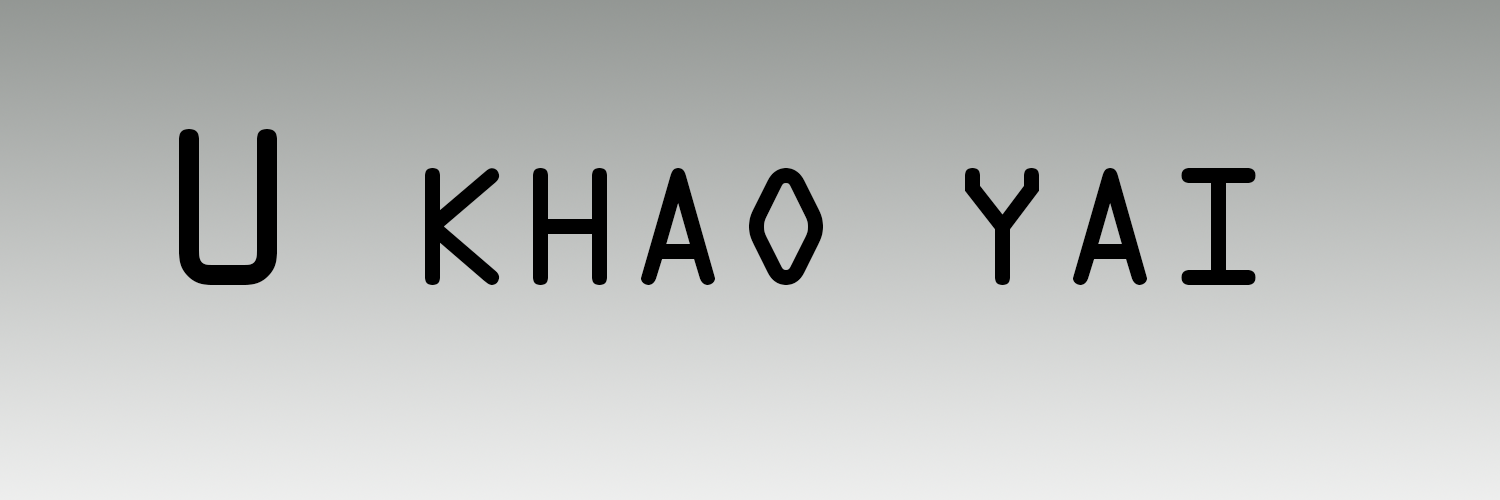
<style>
.page{position:relative;width:1500px;height:500px}
.page>*{position:absolute;margin:0}
.t1{font:150px "OCRAStd";color:#000000}
.t2{font:200px "OCRAStd";color:#000000}
</style>
<div class="page">
<p class="t1" style="left:179px;top:129px;width:1077px;height:156px"><span class="t2">U</span> KHAO YAI</p>
</div>
